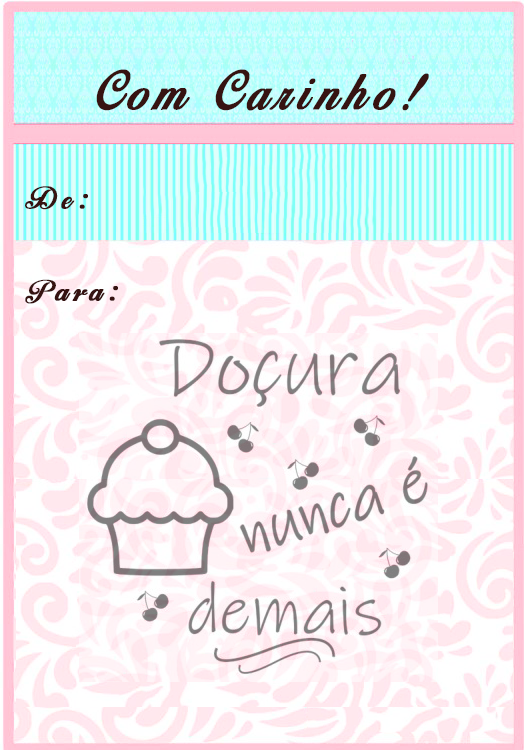
<style>
.page{position:relative;width:524px;height:750px}
.page>*{position:absolute;margin:0}
.t1{font:47px "BirdsofParadise-PersonaluseOnly";letter-spacing:0.16em;color:#361311;font-weight:bold}
.t2{font:47px "BirdsofParadise-PersonaluseOnly";letter-spacing:0.16em;color:#361311;text-transform:uppercase;font-weight:bold}
.t3{font:40px/46px "Ballegra";letter-spacing:0.1em;color:#361311;text-transform:uppercase;font-weight:bold}
.t4{font:40px/46px "Ballegra";letter-spacing:0.1em;color:#361311;font-weight:bold}
</style>
<div class="page">
<p class="t1" style="left:96px;top:69px;width:333px;height:42px"><span class="t2">C</span>om Carinho!</p>
<p class="t3" style="left:25px;top:186px;width:93px;height:118px">D<span class="t4">e</span>:<br><br>P<span class="t4">ara</span>:</p>
</div>
